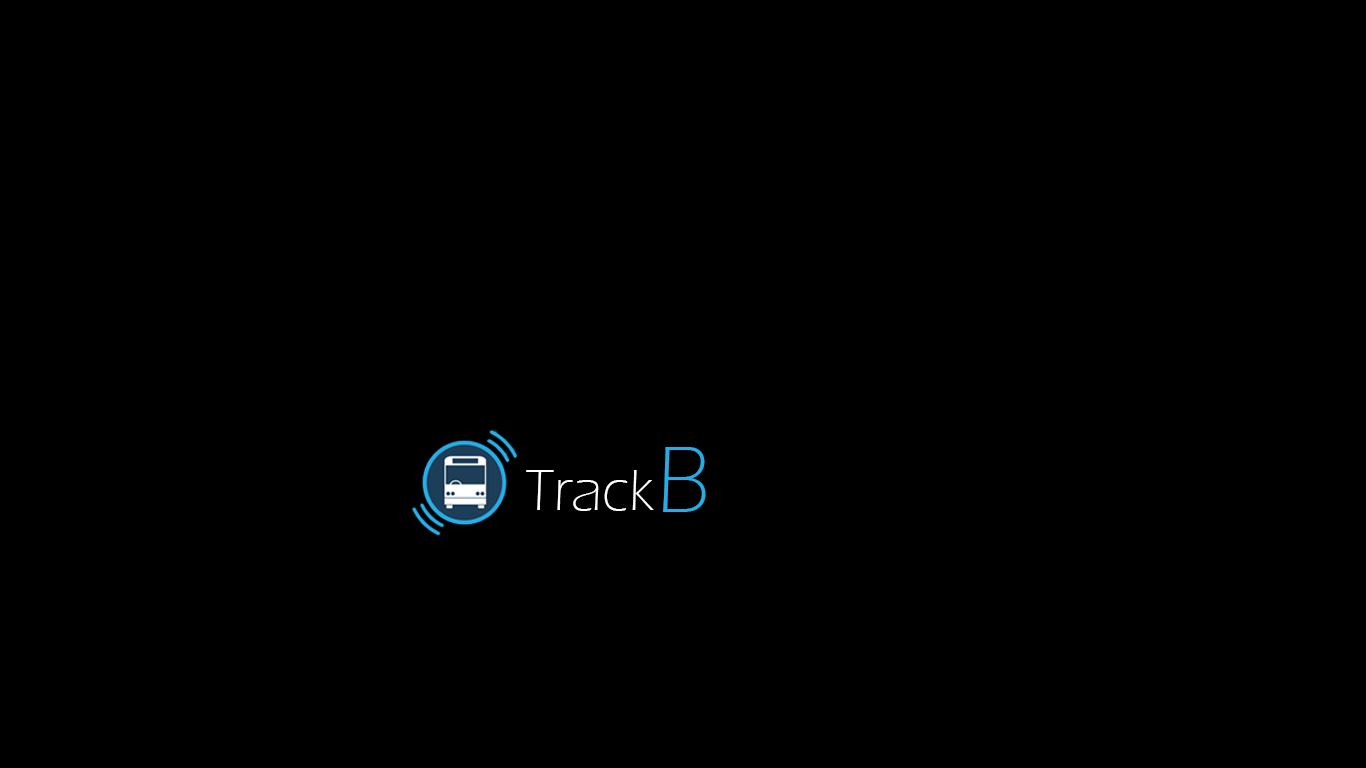
<style>
.page{position:relative;width:1366px;height:768px;background:#000000}
.page>*{position:absolute;margin:0}
.t1{font:96.9px "ErasITC-Light";color:#26ade5}
.t2{font:59.9px "ErasITC-Light";color:#ffffff}
</style>
<div class="page">
<p class="t1" style="left:663px;top:447px;width:43px;height:65px">B</p>
<p class="t2" style="left:526px;top:470px;width:128px;height:41px">Track</p>
</div>
